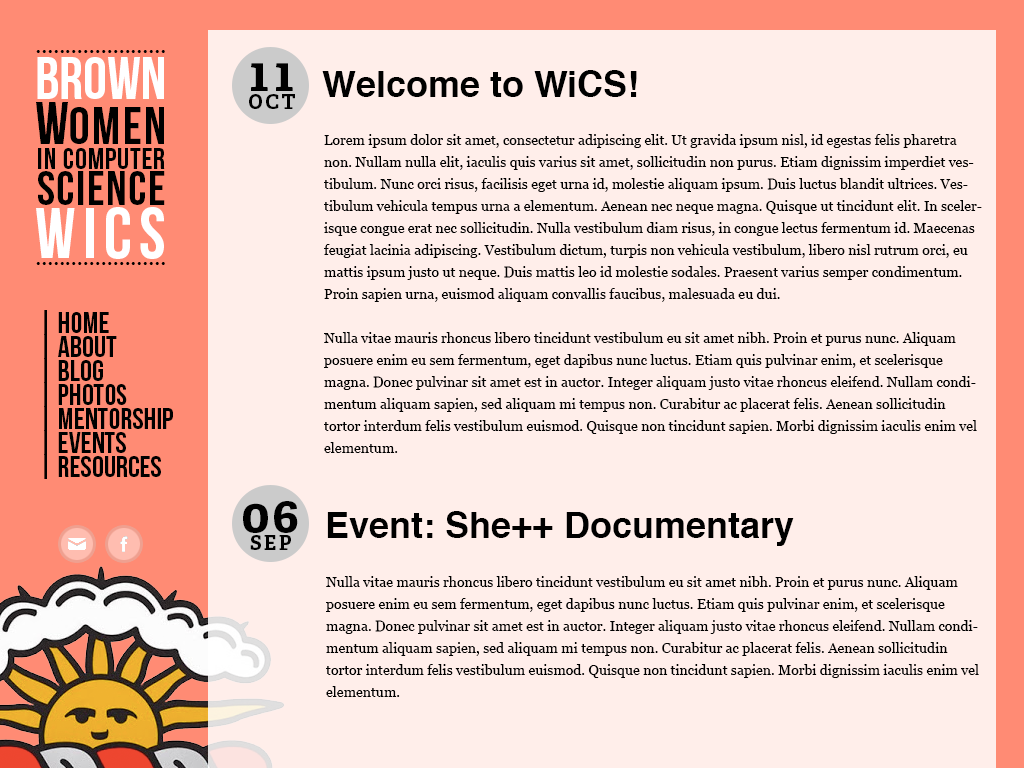
<style>
.page{position:relative;width:1024px;height:768px;background:#ffeeea}
.page>*{position:absolute;margin:0}
.t1{font:24px "AmericanTypewriter";letter-spacing:-0.025em;color:#000000}
.t2{font:60px/45px "BebasNeue";color:#ffffff}
.t3{font:60px/45px "BebasNeue";letter-spacing:-0.025em;color:#000000}
.t4{font:52px/45px "BebasNeue";letter-spacing:0.05em;color:#000000}
.t5{font:20px/18px "AdelleBasic-Bold";letter-spacing:0.12em;color:#000000}
.t6{font:48px/18px "AdelleBasic-Bold";letter-spacing:0.12em;color:#000000}
.t7{font:36px "Helvetica-Bold";color:#000000}
.t8{font:14px/22px "Georgia";color:#000000}
.t9{font:30px/20px "BebasNeue";letter-spacing:0.028em;color:#000000}
.t10{font:48px/36px "BebasNeue";letter-spacing:0.031em;color:#000000}
.t11{font:72px "BebasNeue";letter-spacing:0.1em;color:#ffffff}
.t12{font:30px/24px "BebasNeue";color:#000000}
.t13{font:48px/18px "AdelleBasic-Bold";letter-spacing:0.04em;color:#000000}
</style>
<div class="page">
<p class="t1" style="left:36px;top:50px;width:129px;height:3px">......................</p>
<p class="t2" style="left:36px;top:57px;width:128px;height:87px">Brown<br><span class="t3">W  </span><span class="t4">OMEN</span></p>
<p class="t5" style="left:249px;top:63px;width:46px;height:46px;text-align:center"><span class="t6">11<br></span>OCT</p>
<p class="t7" style="left:322px;top:70px;width:315px;height:27px">Welcome to WiCS!</p>
<p class="t8" style="left:324px;top:134px;width:658px;height:319px">Lorem ipsum dolor sit amet, consectetur adipiscing elit. Ut gravida ipsum nisl, id egestas felis pharetra non. Nullam nulla elit, iaculis quis varius sit amet, sollicitudin non purus. Etiam dignissim imperdiet vestibulum. Nunc orci risus, facilisis eget urna id, molestie aliquam ipsum. Duis luctus blandit ultrices. Vestibulum vehicula tempus urna a elementum. Aenean nec neque magna. Quisque ut tincidunt elit. In scelerisque congue erat nec sollicitudin. Nulla vestibulum diam risus, in congue lectus fermentum id. Maecenas feugiat lacinia adipiscing. Vestibulum dictum, turpis non vehicula vestibulum, libero nisl rutrum orci, eu mattis ipsum justo ut neque. Duis mattis leo id molestie sodales. Praesent varius semper condimentum. Proin sapien urna, euismod aliquam convallis faucibus, malesuada eu dui.<br><br>Nulla vitae mauris rhoncus libero tincidunt vestibulum eu sit amet nibh. Proin et purus nunc. Aliquam posuere enim eu sem fermentum, eget dapibus nunc luctus. Etiam quis pulvinar enim, et scelerisque magna. Donec pulvinar sit amet est in auctor. Integer aliquam justo vitae rhoncus eleifend. Nullam condimentum aliquam sapien, sed aliquam mi tempus non. Curabitur ac placerat felis. Aenean sollicitudin tortor interdum felis vestibulum euismod. Quisque non tincidunt sapien. Morbi dignissim iaculis enim vel elementum.</p>
<p class="t9" style="left:38px;top:148px;width:127px;height:57px">IN COMPUTER<br><span class="t10">SCIENCE</span></p>
<p class="t11" style="left:36px;top:207px;width:128px;height:52px">WICS</p>
<p class="t1" style="left:36px;top:262px;width:129px;height:3px">......................</p>
<p class="t12" style="left:44px;top:310px;width:129px;height:169px">| Home     <br>| About     <br>| Blog     <br>| Photos     <br>| Mentorship     <br>| Events     <br>| Resources</p>
<p class="t5" style="left:243px;top:501px;width:55px;height:49px;text-align:center"><span class="t13">06<br></span>SEP</p>
<p class="t7" style="left:327px;top:511px;width:467px;height:35px">Event: She++ Documentary</p>
<p class="t8" style="left:326px;top:576px;width:653px;height:121px">Nulla vitae mauris rhoncus libero tincidunt vestibulum eu sit amet nibh. Proin et purus nunc. Aliquam posuere enim eu sem fermentum, eget dapibus nunc luctus. Etiam quis pulvinar enim, et scelerisque magna. Donec pulvinar sit amet est in auctor. Integer aliquam justo vitae rhoncus eleifend. Nullam condimentum aliquam sapien, sed aliquam mi tempus non. Curabitur ac placerat felis. Aenean sollicitudin tortor interdum felis vestibulum euismod. Quisque non tincidunt sapien. Morbi dignissim iaculis enim vel elementum.</p>
</div>
